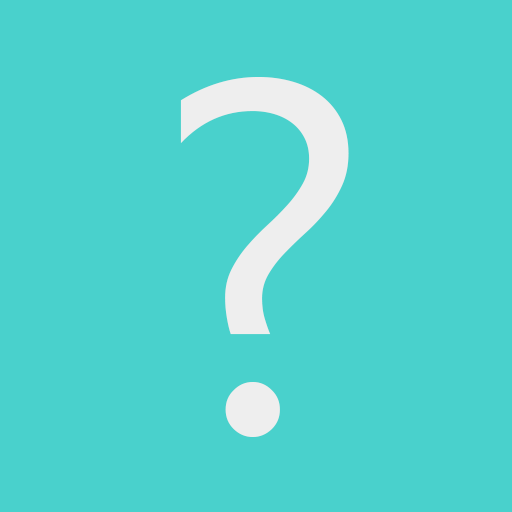
<style>
.page{position:relative;width:512px;height:512px;background:#49d1cc}
.page>*{position:absolute;margin:0}
.t1{font:500px "SegoeUI";color:#eeeeee}
</style>
<div class="page">
<p class="t1" style="left:180px;top:77px;width:169px;height:360px">?</p>
</div>
